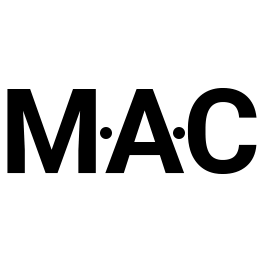
<style>
.page{position:relative;width:260px;height:260px;background:#ffffff}
.page>*{position:absolute;margin:0}
.t1{font:118px "Roboto-Bold";color:#000000}
</style>
<div class="page">
<p class="t1" style="left:7px;top:88px;width:250px;height:86px">MAC</p>
</div>
